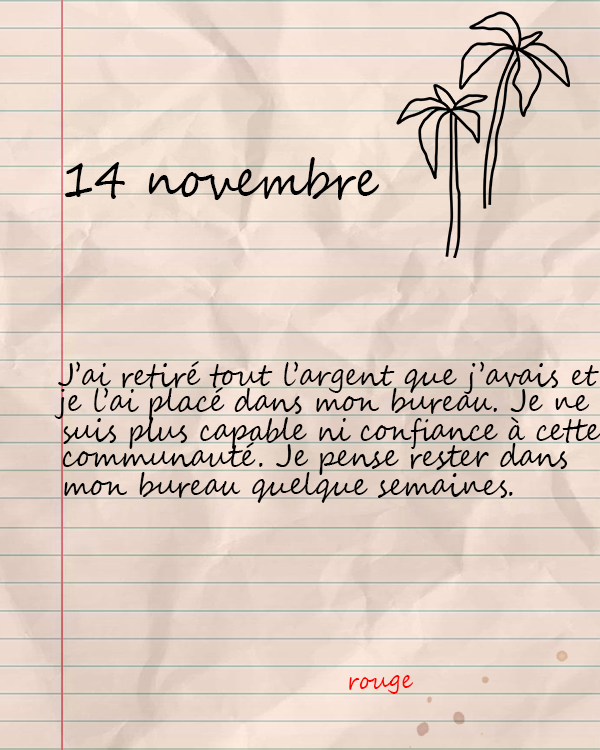
<style>
.page{position:relative;width:600px;height:750px}
.page>*{position:absolute;margin:0}
.t1{font:50px "SegoeScript";color:#000000;scale:0.9 1}
.t2{font:30.9px "SegoeScript";color:#000000;scale:0.9 1}
.t3{font:25px "SegoeScript";color:#ff0000;scale:0.9 1}
</style>
<div class="page">
<p class="t1" style="left:65px;top:157px;width:314px;height:44px">14 novembre</p>
<p class="t2" style="left:58px;top:361px;width:541px;height:33px">J’ai retiré tout l’argent que j’avais et</p>
<p class="t2" style="left:54px;top:387px;width:536px;height:33px">je l’ai placé dans mon bureau. Je ne</p>
<p class="t2" style="left:63px;top:417px;width:538px;height:32px">suis plus capable ni confiance à cette</p>
<p class="t2" style="left:62px;top:442px;width:506px;height:33px">communauté. Je pense rester dans</p>
<p class="t2" style="left:64px;top:472px;width:449px;height:31px">mon bureau quelque semaines.</p>
<p class="t3" style="left:349px;top:675px;width:64px;height:19px">rouge</p>
</div>
